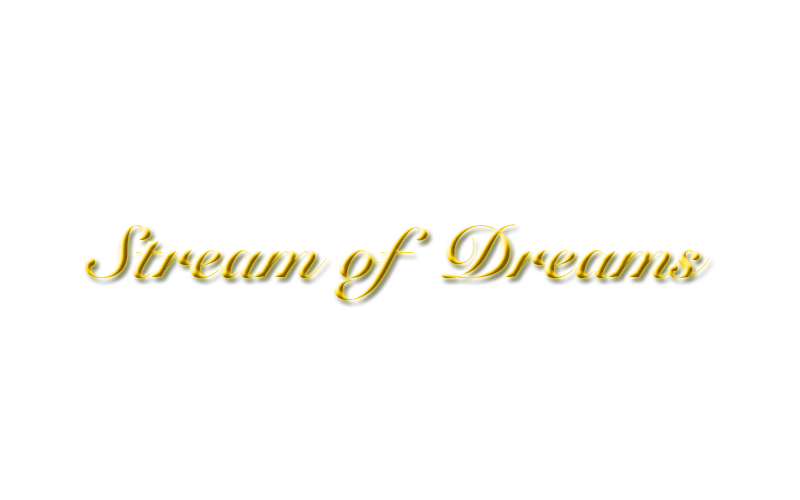
<style>
.page{position:relative;width:800px;height:500px;background:#ffffff}
.page>*{position:absolute;margin:0}
.t1{font:72px "SnellRoundhand-Black"}
</style>
<div class="page">
<p class="t1" style="left:84px;top:224px;width:626px;height:76px">Stream of  Dreams</p>
</div>
